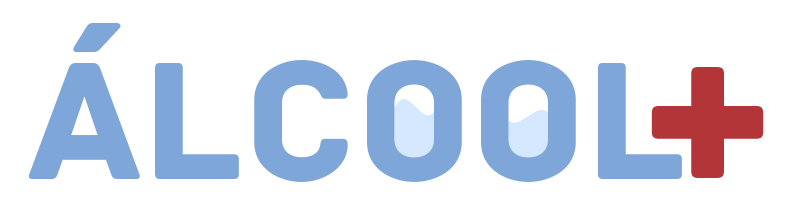
<style>
.page{position:relative;width:790px;height:219px;background:#ffffff}
.page>*{position:absolute;margin:0}
.t1{font:177px "Archive-Regular";color:#7ea6d8}
.t2{font:240.4px "Archive-Regular";color:#b43538}
</style>
<div class="page">
<p class="t1" style="left:28px;top:23px;width:654px;height:159px">ÁLCOOL</p>
<p class="t2" style="left:651px;top:67px;width:113px;height:111px">+</p>
</div>
